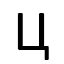
<style>
.page{position:relative;width:64px;height:64px;background:#ffffff}
.page>*{position:absolute;margin:0}
.t1{font:58.3px "Calibri";color:#000000}
</style>
<div class="page">
<p class="t1" style="left:17px;top:13px;width:32px;height:47px">Ц</p>
</div>
